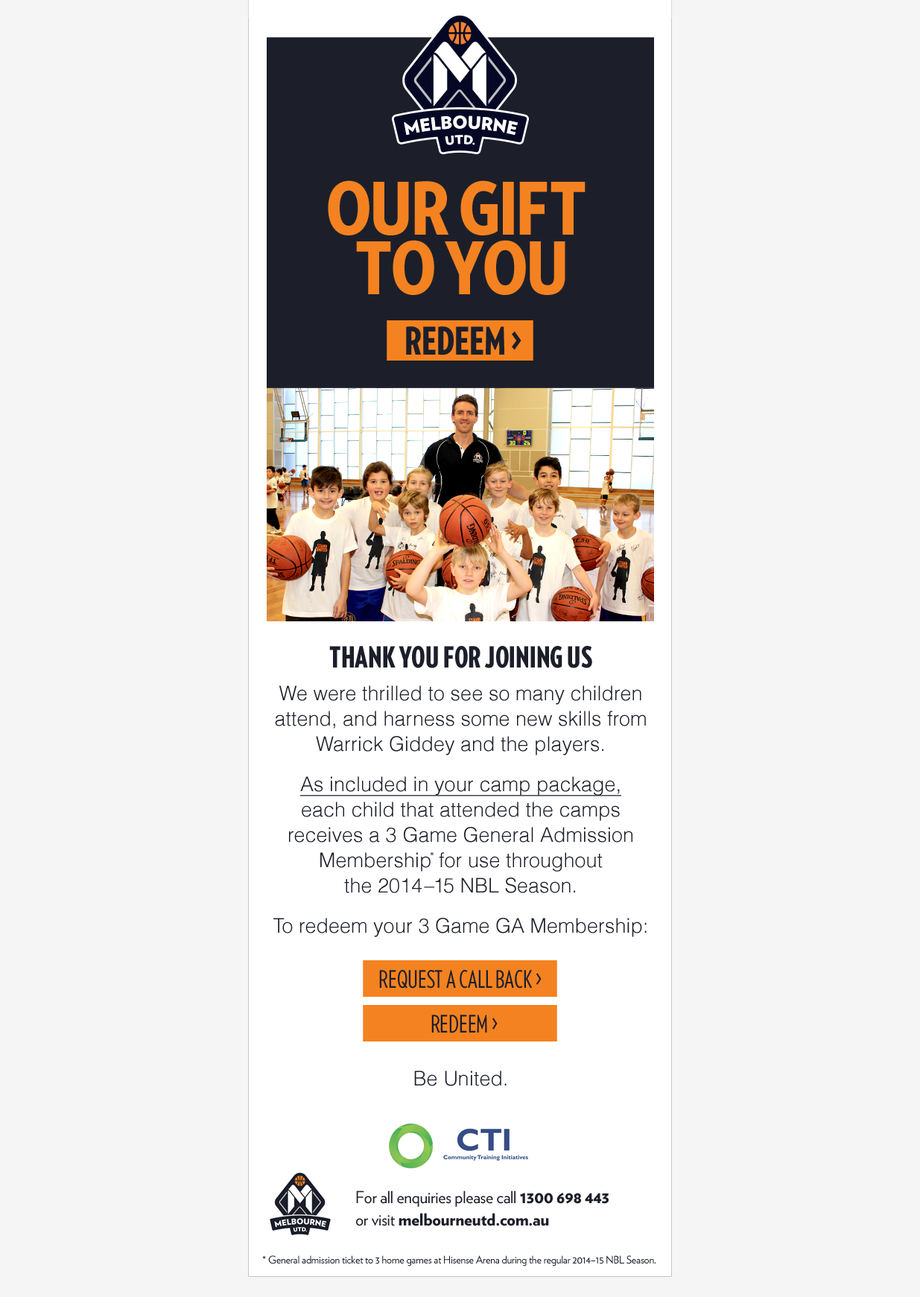
<style>
.page{position:relative;width:920px;height:1297px;background:#f5f5f5}
.page>*{position:absolute;margin:0}
.t1{font:72.2px/59.6px "VerlagCondensed-Black";letter-spacing:-0.03em;color:#f58220;text-transform:uppercase}
.t2{font:72.2px/59.6px "VerlagCondensed-Black";letter-spacing:0.01em;color:#f58220;text-transform:uppercase}
.t3{font:38px "VerlagCompressed-Black";color:#1c1f2a;text-transform:uppercase}
.t4{font:20.1px/25.3px "Helvetica-Light";color:#1c1f2a}
.t5{font:29px/25.3px "VerlagCompressed-Black";color:#1c1f2a;text-transform:uppercase}
.t6{font:20.1px/25.3px "Helvetica-Light";color:#1c1f2a;text-decoration:underline}
.t7{font:20.1px/25.3px "Helvetica-Light";letter-spacing:-0.1em;color:#1c1f2a}
.t8{font:20.1px/25.3px "Helvetica-Light";letter-spacing:0.1em;color:#1c1f2a}
.t9{font:20.1px/25.3px "Helvetica-Light";letter-spacing:-0.061em;color:#1c1f2a}
.t10{font:23.9px "VerlagCompressed-Book";color:#1c1f2a;text-transform:uppercase}
.t11{font:16.5px/22.9px "Verlag-Book";letter-spacing:-0.015em;color:#1c1f2a}
.t12{font:16.5px/22.9px "Verlag-Black";letter-spacing:-0.015em;color:#1c1f2a}
.t13{font:10.4px "Verlag-Book";letter-spacing:-0.015em;color:#1c1f2a}
</style>
<div class="page">
<p class="t1" style="left:328px;top:180px;width:257px;height:115px;text-align:center">our gi<span class="t2">ft</span> <br>to you</p>
<p class="t3" style="left:406px;top:326px;width:115px;height:29px">redeem &gt;</p>
<p class="t4" style="left:273px;top:646px;width:373px;height:440px;text-align:center"><span class="t5">Thank you for joining us<br></span>We were thrilled to see so many children attend, and harness some new skills from Warrick Giddey and the players.<br><span class="t6">As included in your camp package,<br></span>each child that attended the camps receives a 3 Game General Admission Membershi<span class="t7">p*</span> for use throughout <br>the 201<span class="t8">4</span><span class="t9">–1</span>5 NBL Season.<br>To redeem your 3 Game GA Membership:<br>Be United.</p>
<p class="t10" style="left:379px;top:970px;width:162px;height:18px">request a call back &gt;</p>
<p class="t10" style="left:431px;top:1014px;width:66px;height:19px">redeem &gt;</p>
<p class="t11" style="left:356px;top:1190px;width:252px;height:36px">For all enquiries please call <span class="t12">1300 698 443<br></span>or visit <span class="t12">melbourneutd.com.au</span></p>
<p class="t13" style="left:262px;top:1255px;width:394px;height:11px">* General admission ticket to 3 home games at Hisense Arena during the regular 2014–15 NBL Season.</p>
</div>
